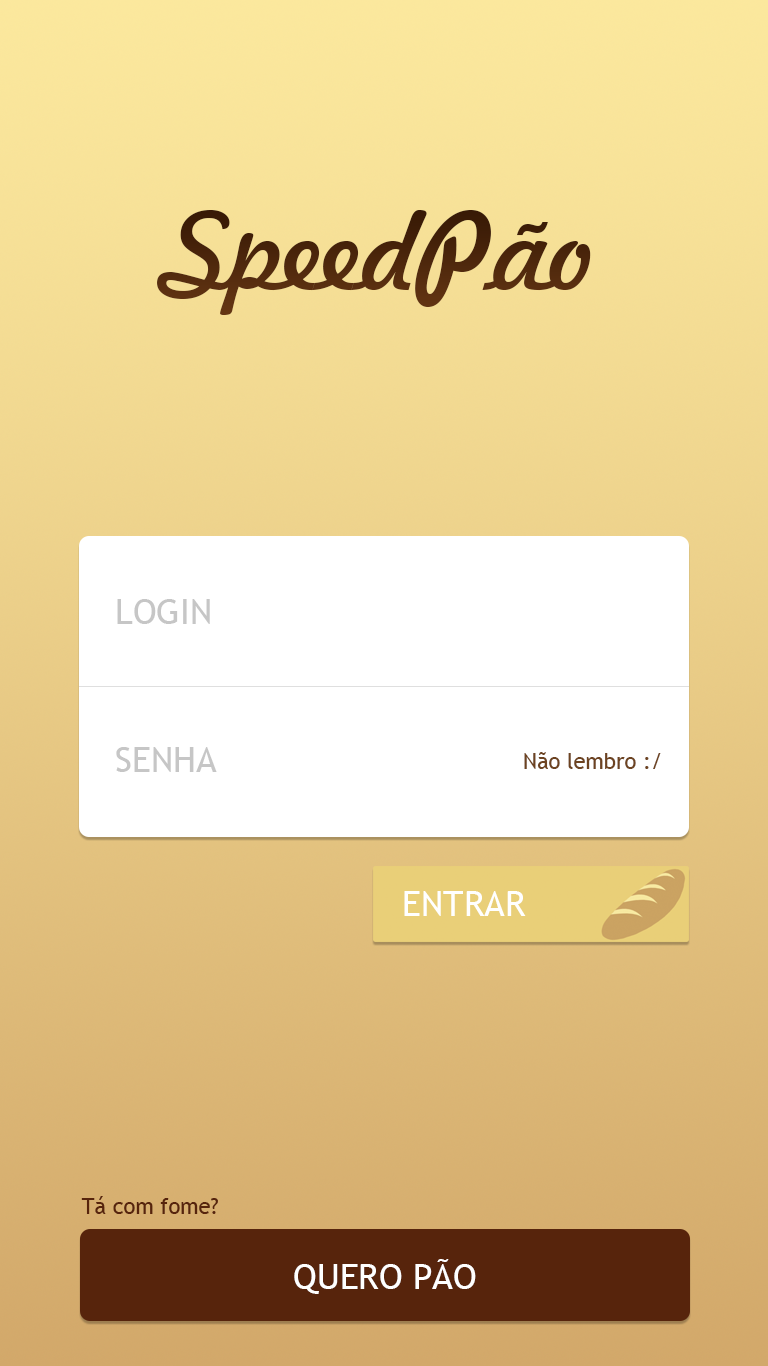
<style>
.page{position:relative;width:768px;height:1366px}
.page>*{position:absolute;margin:0}
.t1{font:104.5px "Freehand521BT-RegularC";color:#4e280c}
.t2{font:35px "TrebuchetMS";color:#c6c6c6}
.t3{font:22px "TrebuchetMS";color:#6d4321}
.t4{font:34.8px "TrebuchetMS";color:#ffffff}
.t5{font:22px "TrebuchetMS";color:#57240c}
</style>
<div class="page">
<p class="t1" style="left:157px;top:210px;width:434px;height:105px">SpeedPão</p>
<p class="t2" style="left:117px;top:599px;width:93px;height:25px">LOGIN</p>
<p class="t2" style="left:116px;top:747px;width:101px;height:25px">SENHA</p>
<p class="t3" style="left:524px;top:752px;width:137px;height:17px">Não lembro :/</p>
<p class="t4" style="left:404px;top:891px;width:122px;height:25px">ENTRAR</p>
<p class="t5" style="left:81px;top:1196px;width:137px;height:18px">Tá com fome?</p>
<p class="t4" style="left:294px;top:1259px;width:182px;height:35px">QUERO PÃO</p>
</div>
